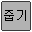
<style>
.page{position:relative;width:32px;height:32px;background:#b2b2b2}
.page>*{position:absolute;margin:0}
.t1{font:12px "Gulim";letter-spacing:0.04em;color:#000000}
</style>
<div class="page">
<p class="t1" style="left:4px;top:10px;width:22px;height:11px">줍기</p>
</div>
